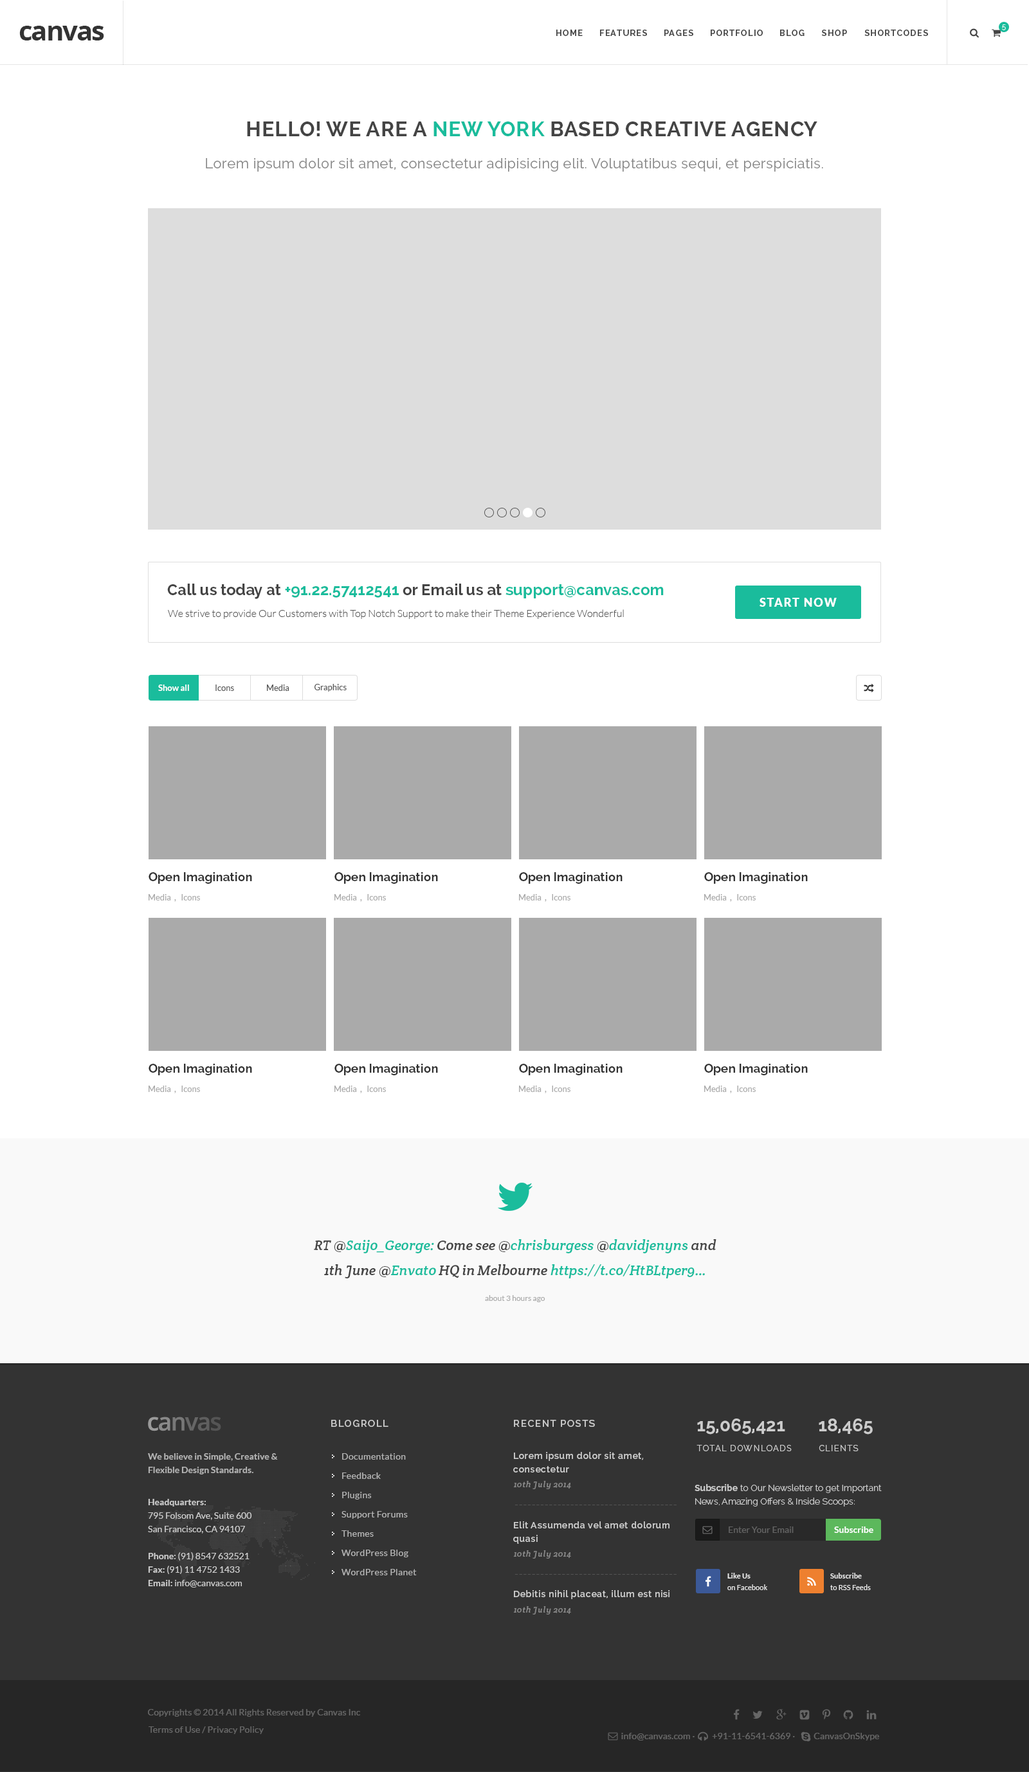
<style>
.page{position:relative;width:1029px;height:1772px;background:#ffffff}
.page>*{position:absolute;margin:0}
.t1{font:27px "OpenSans-Bold";letter-spacing:-0.05em;color:#333333}
.t2{font:8.4px "Raleway-Bold";letter-spacing:0.1em;color:#444444}
.t3{font:7.1px "Raleway-Light";letter-spacing:0.1em;color:#ffffff}
.t4{font:20.6px "Raleway-Bold";letter-spacing:0.025em;color:#444444}
.t5{font:20.6px "Raleway-Bold";letter-spacing:0.025em;color:#1abc9c}
.t6{font:14.1px "Raleway-Regular";letter-spacing:0.025em;color:#888888}
.t7{font:15.4px "Raleway-Bold";color:#1abc9c}
.t8{font:15.4px "Raleway-Bold";color:#444444}
.t9{font:11.6px "Lato-Black";letter-spacing:0.1em;color:#ffffff;text-transform:uppercase}
.t10{font:10.3px "Lato-Light";color:#555555}
.t11{font:8.4px "Lato-Bold";color:#ffffff}
.t12{font:8.4px "Lato-Regular";color:#555555}
.t13{font:12.2px "Raleway-Bold";color:#333333}
.t14{font:8.4px "Lato-Regular";color:#aaaaaa}
.t15{font:14.1px/25.1px "CreteRound-Italic";color:#1abc9c}
.t16{font:14.1px/25.1px "CreteRound-Italic";color:#444444}
.t17{font:7.7px "Lato-Regular";color:#aaaaaa}
.t18{font:9.6px "Raleway-SemiBold";letter-spacing:0.1em;color:#cccccc}
.t19{font:18px "Raleway-Bold";color:#cccccc}
.t20{font:8.4px "Raleway-Regular";letter-spacing:0.1em;color:#cacaca;text-transform:uppercase}
.t21{font:9px/13.5px "Lato-Bold";color:#cccccc}
.t22{font:9px/19.3px "Lato-Regular";letter-spacing:0.025em;color:#cccccc}
.t23{font:9px/13.5px "Raleway-SemiBold";letter-spacing:0.05em;color:#cccccc}
.t24{font:8.4px "CreteRound-Italic";letter-spacing:0.05em;color:#888888}
.t25{font:9px/13.5px "Raleway-Light";color:#cccccc}
.t26{font:9px/13.5px "Raleway-Bold";color:#cccccc}
.t27{font:9px/13.5px "Lato-Regular";color:#cccccc}
.t28{font:11.6px "Lato-Italic";letter-spacing:0.05em;color:#545454}
.t29{font:9px "Lato-Regular";color:#777777}
.t30{font:9px "Lato-Bold";color:#ffffff}
.t31{font:7.1px/11.6px "Lato-Regular";letter-spacing:0.01em;color:#eeeeee}
.t32{font:7.1px/11.6px "Lato-Bold";letter-spacing:0.01em;color:#eeeeee}
.t33{font:9px "Raleway-SemiBold";letter-spacing:0.05em;color:#cccccc}
.t34{font:9px "Lato-Regular";letter-spacing:0.01em;color:#666666}
</style>
<div class="page">
<p class="t1" style="left:19px;top:26px;width:85px;height:14px">canvas</p>
<p class="t2" style="left:556px;top:30px;width:26px;height:6px">HOME</p>
<p class="t2" style="left:600px;top:30px;width:47px;height:6px">FEATURES</p>
<p class="t2" style="left:664px;top:30px;width:29px;height:6px">PAGES</p>
<p class="t2" style="left:710px;top:30px;width:52px;height:6px">PORTFOLIO</p>
<p class="t2" style="left:780px;top:30px;width:24px;height:6px">BLOG</p>
<p class="t2" style="left:822px;top:30px;width:25px;height:6px">SHOP</p>
<p class="t2" style="left:864px;top:30px;width:64px;height:6px">SHORTCODES</p>
<p class="t3" style="left:1002px;top:24px;width:3px;height:6px">5</p>
<p class="t4" style="left:247px;top:122px;width:570px;height:14px">HELLO! WE ARE A <span class="t5">NEW YORK</span> BASED CREATIVE AGENCY</p>
<p class="t6" style="left:206px;top:158px;width:617px;height:14px">Lorem ipsum dolor sit amet, consectetur adipisicing elit. Voluptatibus sequi, et perspiciatis.</p>
<p class="t7" style="left:167px;top:584px;width:496px;height:15px"><span class="t8">Call us today at </span>+91.22.57412541<span class="t8"> or Email us at </span>support@canvas.com</p>
<p class="t9" style="left:759px;top:598px;width:77px;height:9px">Start Now</p>
<p class="t10" style="left:168px;top:609px;width:456px;height:10px">We strive to provide Our Customers with Top Notch Support to make their Theme Experience Wonderful</p>
<p class="t11" style="left:158px;top:685px;width:31px;height:6px">Show all</p>
<p class="t12" style="left:215px;top:685px;width:19px;height:6px">Icons</p>
<p class="t12" style="left:267px;top:685px;width:22px;height:6px">Media</p>
<p class="t12" style="left:314px;top:684px;width:32px;height:8px">Graphics</p>
<p class="t13" style="left:148px;top:872px;width:104px;height:12px">Open Imagination</p>
<p class="t13" style="left:334px;top:872px;width:104px;height:12px">Open Imagination</p>
<p class="t13" style="left:519px;top:872px;width:103px;height:12px">Open Imagination</p>
<p class="t13" style="left:704px;top:872px;width:103px;height:12px">Open Imagination</p>
<p class="t14" style="left:148px;top:894px;width:52px;height:8px">Media  ,   Icons</p>
<p class="t14" style="left:334px;top:894px;width:52px;height:8px">Media  ,   Icons</p>
<p class="t14" style="left:519px;top:894px;width:51px;height:8px">Media  ,   Icons</p>
<p class="t14" style="left:704px;top:894px;width:51px;height:8px">Media  ,   Icons</p>
<p class="t13" style="left:148px;top:1064px;width:104px;height:12px">Open Imagination</p>
<p class="t13" style="left:334px;top:1064px;width:104px;height:12px">Open Imagination</p>
<p class="t13" style="left:519px;top:1064px;width:103px;height:12px">Open Imagination</p>
<p class="t13" style="left:704px;top:1064px;width:103px;height:12px">Open Imagination</p>
<p class="t14" style="left:148px;top:1086px;width:52px;height:8px">Media  ,   Icons</p>
<p class="t14" style="left:334px;top:1086px;width:52px;height:8px">Media  ,   Icons</p>
<p class="t14" style="left:519px;top:1086px;width:51px;height:8px">Media  ,   Icons</p>
<p class="t14" style="left:704px;top:1086px;width:51px;height:8px">Media  ,   Icons</p>
<p class="t15" style="left:314px;top:1239px;width:402px;height:40px;text-align:center"><span class="t16">RT @</span>Saijo_George:<span class="t16"> Come see @</span>chrisburgess<span class="t16"> @</span>davidjenyns<span class="t16"> and<br>1th June @</span>Envato<span class="t16"> HQ in Melbourne </span>https://t.co/HtBLtper9…</p>
<p class="t17" style="left:485px;top:1295px;width:60px;height:7px">about 3 hours ago</p>
<p class="t18" style="left:331px;top:1420px;width:57px;height:7px">BLOGROLL</p>
<p class="t18" style="left:514px;top:1420px;width:81px;height:7px">RECENT POSTS</p>
<p class="t19" style="left:697px;top:1419px;width:88px;height:16px">15,065,421</p>
<p class="t19" style="left:818px;top:1419px;width:54px;height:16px">18,465</p>
<p class="t20" style="left:696px;top:1445px;width:95px;height:7px">TOTAL Downloads</p>
<p class="t20" style="left:818px;top:1445px;width:40px;height:7px">CLIENTS</p>
<p class="t21" style="left:148px;top:1454px;width:130px;height:21px;opacity:0.8">We believe in Simple, Creative &amp;<br>Flexible Design Standards.</p>
<p class="t22" style="left:341px;top:1454px;width:76px;height:122px;opacity:0.8">Documentation<br>Feedback<br>Plugins<br>Support Forums<br>Themes<br>WordPress Blog<br>WordPress Planet</p>
<p class="t23" style="left:513px;top:1452px;width:130px;height:21px">Lorem ipsum dolor sit amet,<br>consectetur</p>
<p class="t24" style="left:513px;top:1481px;width:58px;height:9px">10th July 2014</p>
<p class="t25" style="left:694px;top:1484px;width:187px;height:23px"><span class="t26">Subscribe</span> to Our Newsletter to get Important<br>News, Amazing Offers &amp; Inside Scoops:</p>
<p class="t27" style="left:148px;top:1499px;width:104px;height:89px"><span class="t21">Headquarters:<br></span>795 Folsom Ave, Suite 600<br>San Francisco, CA 94107<br><span class="t21"><br>Phone: </span>(91) 8547 632521<br><span class="t21">Fax: </span>(91) 11 4752 1433<br><span class="t21">Email: </span>info@canvas.com</p>
<p class="t28" style="left:514px;top:1505px;width:162px;height:1px">--------------------------------------</p>
<p class="t23" style="left:513px;top:1522px;width:156px;height:22px">Elit Assumenda vel amet dolorum<br>quasi</p>
<p class="t29" style="left:728px;top:1527px;width:65px;height:6px;opacity:0.7">Enter Your Email</p>
<p class="t30" style="left:834px;top:1527px;width:39px;height:6px">Subscribe</p>
<p class="t24" style="left:513px;top:1551px;width:58px;height:8px">10th July 2014</p>
<p class="t28" style="left:514px;top:1574px;width:162px;height:1px">--------------------------------------</p>
<p class="t31" style="left:727px;top:1573px;width:40px;height:17px"><span class="t32">Like Us<br></span>on Facebook</p>
<p class="t31" style="left:830px;top:1573px;width:40px;height:17px"><span class="t32">Subscribe<br></span>to RSS Feeds</p>
<p class="t33" style="left:514px;top:1590px;width:155px;height:9px">Debitis nihil placeat, illum est nisi</p>
<p class="t24" style="left:513px;top:1607px;width:58px;height:8px">10th July 2014</p>
<p class="t34" style="left:148px;top:1709px;width:212px;height:8px">Copyrights © 2014 All Rights Reserved by Canvas Inc</p>
<p class="t34" style="left:148px;top:1727px;width:116px;height:7px">Terms of Use / Privacy Policy</p>
<p class="t34" style="left:621px;top:1733px;width:258px;height:8px">info@canvas.com ·   +91-11-6541-6369 ·        CanvasOnSkype</p>
</div>
